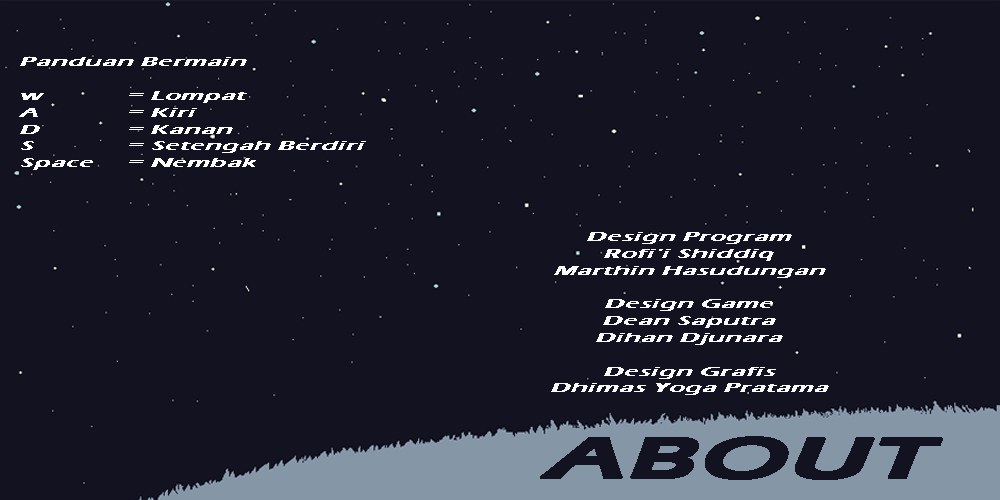
<style>
.page{position:relative;width:1000px;height:500px;background:#121220}
.page>*{position:absolute;margin:0}
.t1{font:14px "ErasITC-Demi";color:#ffffff;font-weight:bold;font-style:italic;scale:1.78 1}
.t2{font:14px "ErasITC-Demi";color:#fafafc;font-weight:bold;font-style:italic;scale:1.78 1}
.t3{font:58.6px "ErasITC-Demi";color:#121220;font-weight:bold;font-style:italic;scale:1.78 1}
</style>
<div class="page">
<p class="t1" style="left:19px;top:57px;width:347px;height:113px">Panduan Bermain<br><br>w   = Lompat<br>A      = Kiri<br>D   = Kanan<br>S   = Setengah Berdiri<br>Space = Nembak</p>
<p class="t2" style="left:551px;top:232px;width:278px;height:163px;text-align:center">Design Program<br>Rofi’i Shiddiq<br>Marthin Hasudungan<br><br>Design Game<br>Dean Saputra<br>Dihan Djunara<br><br>Design Grafis<br>Dhimas Yoga Pratama</p>
<p class="t3" style="left:540px;top:436px;width:403px;height:44px">ABOUT</p>
</div>
